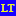
<style>
.page{position:relative;width:16px;height:16px;background:#1800ff}
.page>*{position:absolute;margin:0}
.t1{font:11px "BodoniMT";color:#f6ff00}
</style>
<div class="page">
<p class="t1" style="left:1px;top:4px;width:14px;height:8px">LT</p>
</div>
